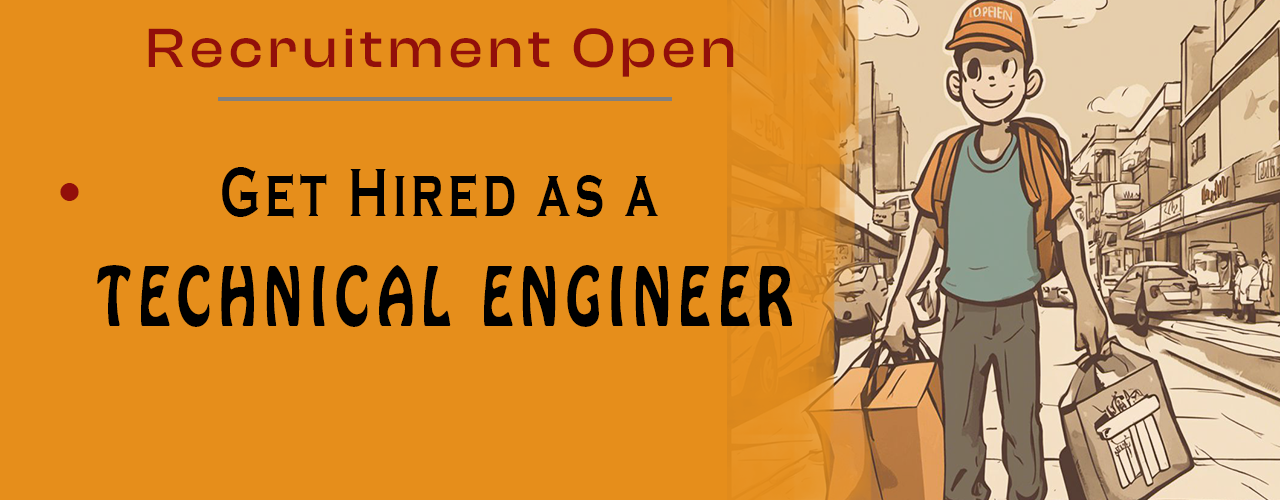
<style>
.page{position:relative;width:1280px;height:500px;background:#e68e1b}
.page>*{position:absolute;margin:0}
.t1{font:57.1px "ClashDisplay-Medium";letter-spacing:0.1em;color:#920f0a}
.t2{font:72px "CopperplateGothic-Bold";letter-spacing:0.1em;color:#000000;scale:0.65 1}
.t3{font:91.7px "GoudyStout";letter-spacing:0.1em;color:#920f0a;scale:0.96 1}
.t4{font:72.3px "HoboStd";letter-spacing:0.14em;color:#000000;scale:0.74 1}
</style>
<div class="page">
<p class="t1" style="left:148px;top:28px;width:586px;height:49px">Recruitment Open</p>
<p class="t2" style="left:222px;top:167px;width:436px;height:51px">Get Hired as a</p>
<p class="t3" style="left:60px;top:183px;width:19px;height:18px">.</p>
<p class="t4" style="left:97px;top:265px;width:695px;height:62px">TECHNICAL ENGINEER</p>
</div>
